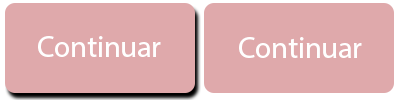
<style>
.page{position:relative;width:400px;height:100px;background:#dfa9ab}
.page>*{position:absolute;margin:0}
.t1{font:30px "MyriadHebrew-Regular";color:#ffffff}
</style>
<div class="page">
<p class="t1" style="left:38px;top:36px;width:123px;height:21px">Continuar</p>
<p class="t1" style="left:239px;top:37px;width:123px;height:21px">Continuar</p>
</div>
